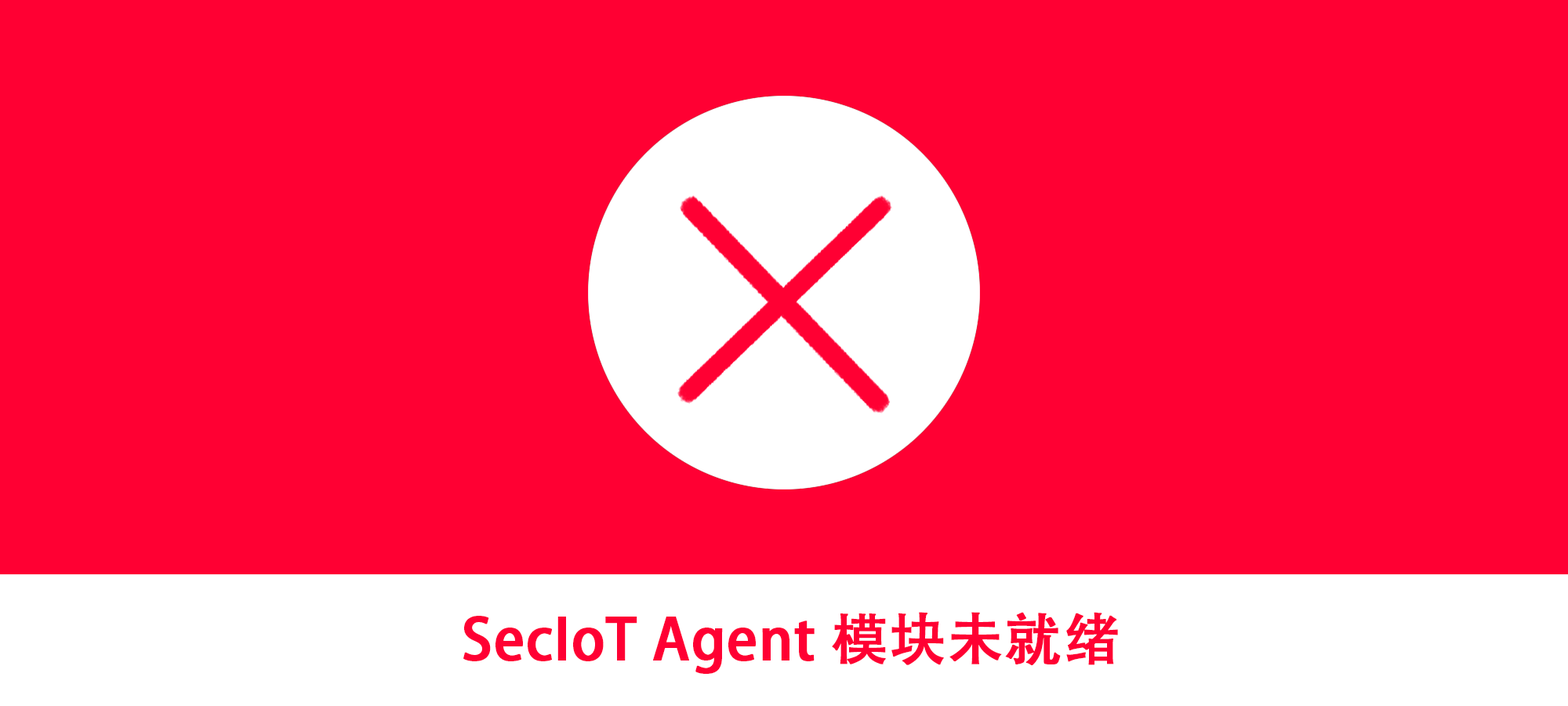
<style>
.page{position:relative;width:1568px;height:706px;background:#ff0033}
.page>*{position:absolute;margin:0}
.t1{font:56.4px "AdobeHeitiStd-Regular";color:#ff0033;font-weight:bold}
</style>
<div class="page">
<p class="t1" style="left:463px;top:612px;width:655px;height:61px">SecIoT Agent 模块未就绪</p>
</div>
